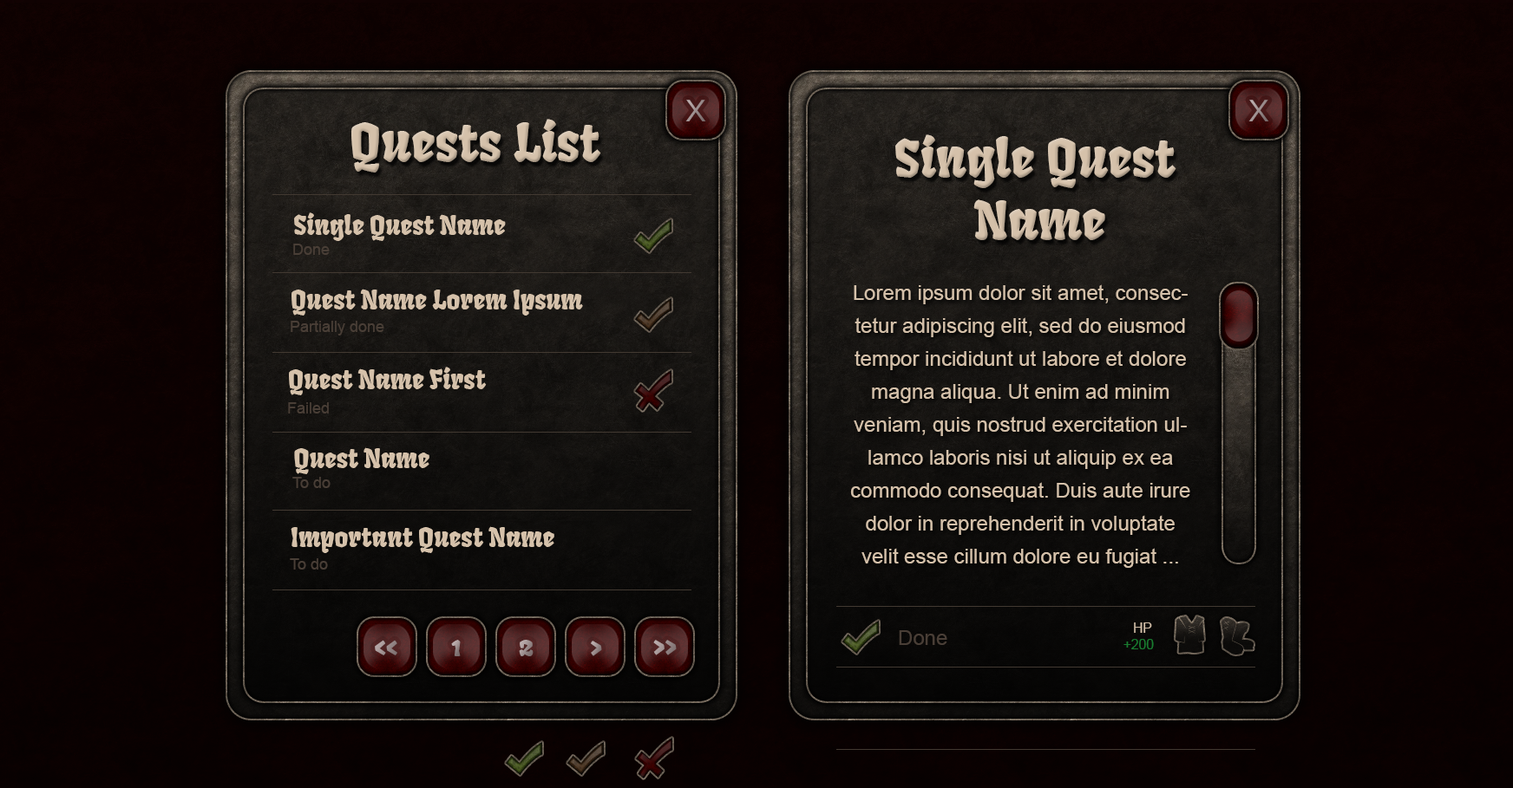
<style>
.page{position:relative;width:1513px;height:788px}
.page>*{position:absolute;margin:0}
.t1{font:41.6px "Kalinga";color:#9e9090}
.t2{font:52px "Fruktur-Regular";color:#d5c1aa}
.t3{font:26px "Fruktur-Regular";color:#d5c1aa}
.t4{font:15.6px "ArialMT";color:#493e36}
.t5{font:20.8px/33px "ArialMT";color:#d5c1aa}
.t6{font:13.6px "ArialMT";color:#d5c1aa}
.t7{font:27.8px "Fruktur-Regular";color:#998b8b}
.t8{font:27.8px "Fruktur-Regular"}
.t9{font:20.8px "ArialMT";color:#493e36}
.t10{font:13.6px "ArialMT";color:#197b30}
</style>
<div class="page">
<p class="t1" style="left:685px;top:100px;width:21px;height:21px">x</p>
<p class="t1" style="left:1248px;top:100px;width:21px;height:21px">x</p>
<p class="t2" style="left:351px;top:119px;width:250px;height:54px">Quests List</p>
<p class="t2" style="left:895px;top:134px;width:281px;height:106px;text-align:center">Single Quest <br>Name</p>
<p class="t3" style="left:294px;top:212px;width:212px;height:29px">Single Quest Name</p>
<p class="t4" style="left:293px;top:244px;width:37px;height:11px">Done</p>
<p class="t3" style="left:291px;top:289px;width:292px;height:27px">Quest Name Lorem Ipsum</p>
<p class="t5" style="left:850px;top:284px;width:340px;height:284px;text-align:center">Lorem ipsum dolor sit amet, consectetur adipiscing elit, sed do eiusmod tempor incididunt ut labore et dolore magna aliqua. Ut enim ad minim veniam, quis nostrud exercitation ullamco laboris nisi ut aliquip ex ea commodo consequat. Duis aute irure dolor in reprehenderit in voluptate velit esse cillum dolore eu fugiat ...</p>
<p class="t4" style="left:291px;top:321px;width:93px;height:15px">Partially done</p>
<p class="t3" style="left:289px;top:367px;width:198px;height:28px">Quest Name First</p>
<p class="t4" style="left:288px;top:402px;width:41px;height:12px">Failed</p>
<p class="t3" style="left:294px;top:448px;width:135px;height:26px">Quest Name</p>
<p class="t4" style="left:292px;top:477px;width:38px;height:11px">To do</p>
<p class="t3" style="left:291px;top:526px;width:263px;height:27px">Important Quest Name</p>
<p class="t4" style="left:290px;top:559px;width:38px;height:11px">To do</p>
<p class="t6" style="left:1134px;top:623px;width:18px;height:10px">HP</p>
<p class="t7" style="left:375px;top:640px;width:22px;height:16px">&lt;&lt;</p>
<p class="t8" style="left:451px;top:640px;width:10px;height:17px">1</p>
<p class="t8" style="left:519px;top:640px;width:14px;height:17px">2</p>
<p class="t7" style="left:591px;top:641px;width:11px;height:16px">&gt;</p>
<p class="t8" style="left:653px;top:640px;width:23px;height:16px">&gt;&gt;</p>
<p class="t9" style="left:899px;top:631px;width:48px;height:14px">Done</p>
<p class="t10" style="left:1123px;top:639px;width:30px;height:11px">+200</p>
</div>
